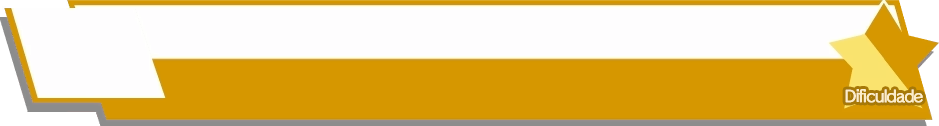
<style>
.page{position:relative;width:939px;height:126px;background:#fefdfe}
.page>*{position:absolute;margin:0}
.t1{font:16px "RodinPro-M";letter-spacing:-0.06em;color:#fcedca;font-weight:bold}
</style>
<div class="page">
<p class="t1" style="left:845px;top:89px;width:78px;height:14px">Dificuldade</p>
</div>
